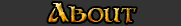
<style>
.page{position:relative;width:181px;height:26px;background:#333333}
.page>*{position:absolute;margin:0}
.t1{font:24px "Moria";font-variant:small-caps}
</style>
<div class="page">
<p class="t1" style="left:48px;top:3px;width:88px;height:20px">About</p>
</div>
